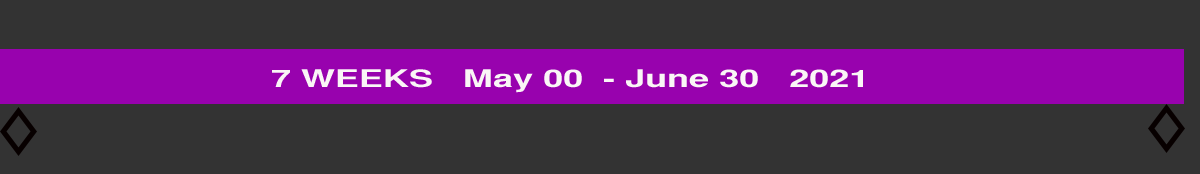
<style>
.page{position:relative;width:1200px;height:174px;background:#333333}
.page>*{position:absolute;margin:0}
.t1{font:24px "SansSerifBold";color:#faf6f6;scale:1.5 1}
</style>
<div class="page">
<p class="t1" style="left:272px;top:69px;width:591px;height:24px">7 WEEKS   May 00  - June 30   2021</p>
</div>
